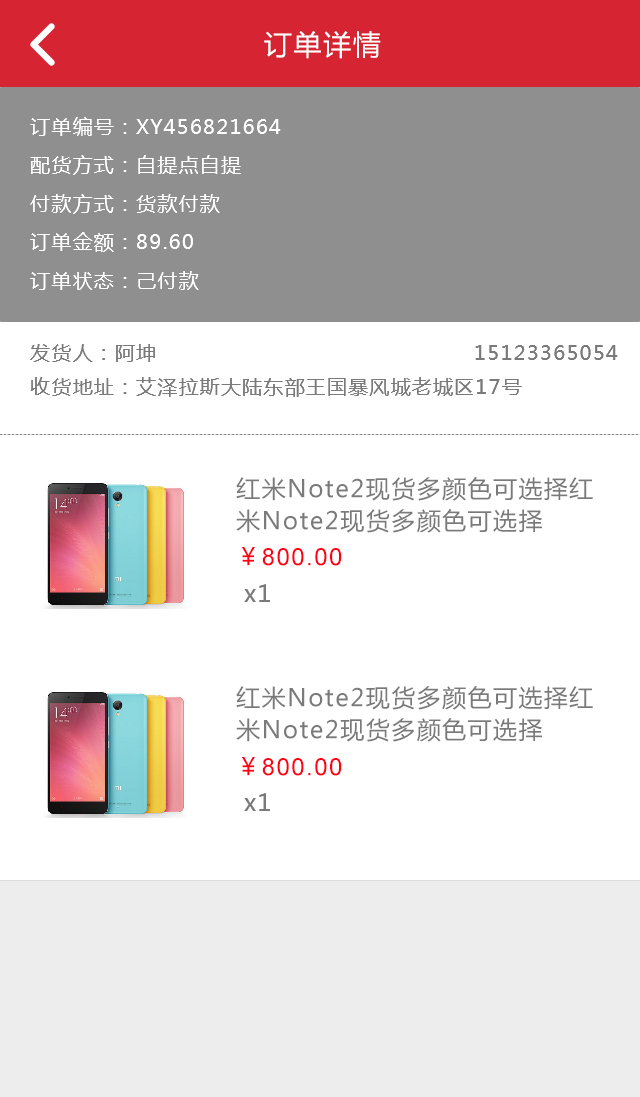
<style>
.page{position:relative;width:640px;height:1097px;background:#ffffff}
.page>*{position:absolute;margin:0}
.t1{font:28px "MicrosoftYaHei";letter-spacing:0.06em;color:#ffffff}
.t2{font:20px "MicrosoftYaHei";letter-spacing:0.06em;color:#ffffff}
.t3{font:20px "MicrosoftYaHei";letter-spacing:0.06em;color:#7a7a7a}
.t4{font:24px/32px "MicrosoftYaHei";letter-spacing:0.06em;color:#7a7a7a}
.t5{font:24px "ArialMT";letter-spacing:0.06em;color:#ff0014}
.t6{font:24px "MicrosoftYaHei";letter-spacing:0.06em;color:#ff0014}
.t7{font:24px "MicrosoftYaHei";letter-spacing:0.06em;color:#7a7a7a}
</style>
<div class="page">
<p class="t1" style="left:264px;top:31px;width:117px;height:28px">订单详情</p>
<p class="t2" style="left:30px;top:117px;width:251px;height:19px">订单编号：XY456821664</p>
<p class="t2" style="left:30px;top:155px;width:211px;height:20px">配货方式：自提点自提</p>
<p class="t2" style="left:30px;top:194px;width:190px;height:20px">付款方式：货款付款</p>
<p class="t2" style="left:30px;top:232px;width:163px;height:20px">订单金额：89.60</p>
<p class="t2" style="left:30px;top:271px;width:169px;height:19px">订单状态：己付款</p>
<p class="t3" style="left:30px;top:344px;width:125px;height:18px">发货人：阿坤</p>
<p class="t3" style="left:475px;top:345px;width:143px;height:15px">15123365054</p>
<p class="t3" style="left:30px;top:377px;width:492px;height:20px">收货地址：艾泽拉斯大陆东部王国暴风城老城区17号</p>
<p class="t4" style="left:236px;top:477px;width:357px;height:56px">红米Note2现货多颜色可选择红米Note2现货多颜色可选择</p>
<p class="t5" style="left:241px;top:547px;width:101px;height:19px"><span class="t6">￥</span>800.00</p>
<p class="t7" style="left:244px;top:584px;width:26px;height:18px">x1</p>
<p class="t4" style="left:236px;top:686px;width:357px;height:56px">红米Note2现货多颜色可选择红米Note2现货多颜色可选择</p>
<p class="t5" style="left:241px;top:757px;width:101px;height:19px"><span class="t6">￥</span>800.00</p>
<p class="t7" style="left:244px;top:793px;width:26px;height:18px">x1</p>
</div>
